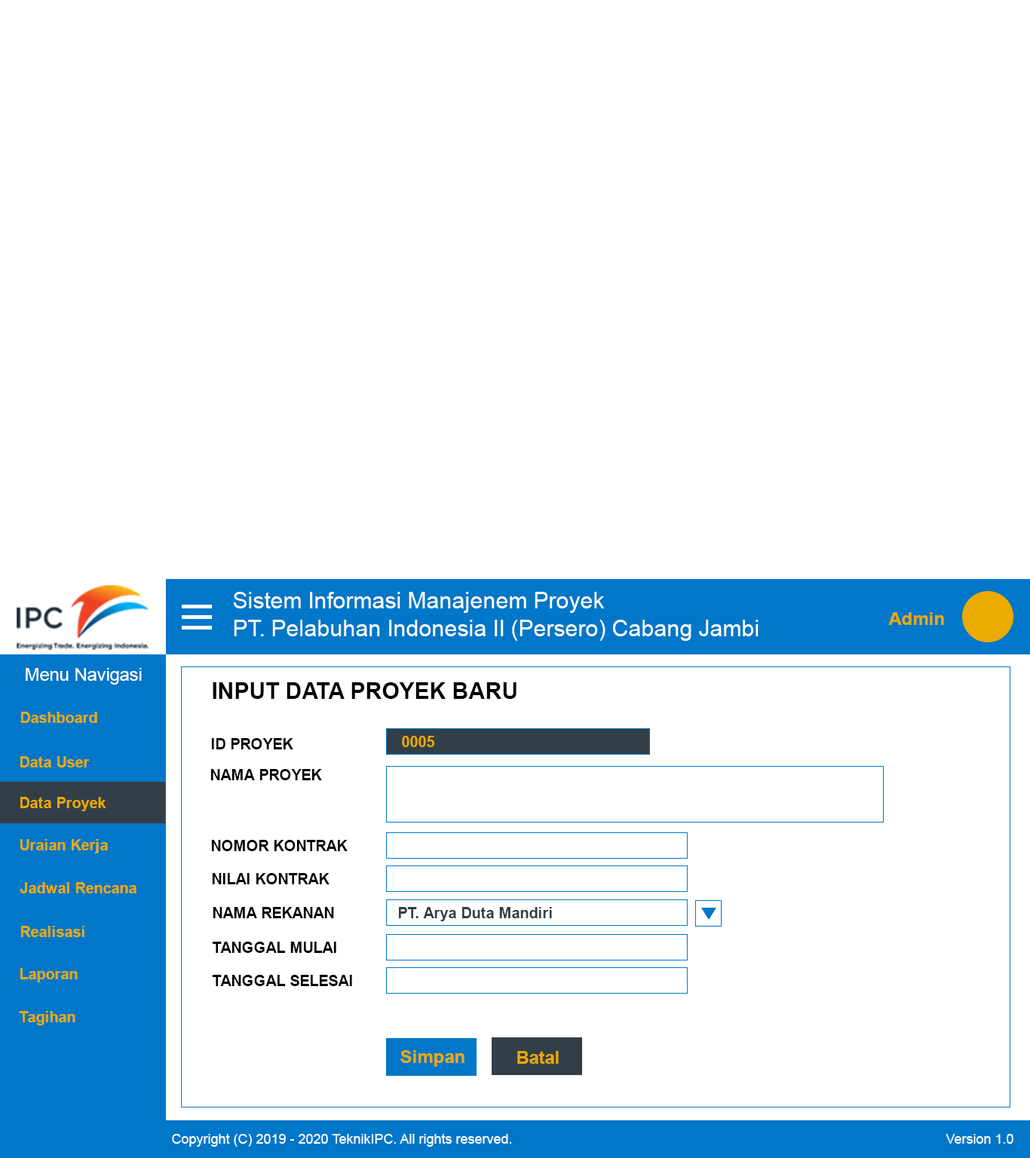
<style>
.page{position:relative;width:1030px;height:1158px;background:#ffffff}
.page>*{position:absolute;margin:0}
.t1{font:22.6px "ArialMT";color:#ffffff}
.t2{font:18.1px "Arial-BoldMT";color:#eaaa00}
.t3{font:18.1px "ArialMT";color:#ffffff}
.t4{font:22.6px "Arial-BoldMT";color:#000000}
.t5{font:15.1px "Arial-BoldMT";color:#eaaa00}
.t6{font:15.1px "Arial-BoldMT";color:#000000}
.t7{font:15.1px "Arial-BoldMT";color:#323e48}
.t8{font:13.6px "ArialMT";color:#ffffff}
</style>
<div class="page">
<p class="t1" style="left:233px;top:592px;width:372px;height:21px">Sistem Informasi Manajenem Proyek</p>
<p class="t2" style="left:888px;top:612px;width:56px;height:13px">Admin</p>
<p class="t1" style="left:234px;top:620px;width:524px;height:21px">PT. Pelabuhan Indonesia II (Persero) Cabang Jambi</p>
<p class="t3" style="left:26px;top:668px;width:116px;height:17px">Menu Navigasi</p>
<p class="t4" style="left:213px;top:682px;width:303px;height:17px">INPUT DATA PROYEK BARU</p>
<p class="t5" style="left:21px;top:712px;width:76px;height:11px">Dashboard</p>
<p class="t5" style="left:402px;top:736px;width:32px;height:11px">0005</p>
<p class="t6" style="left:211px;top:738px;width:82px;height:11px">ID PROYEK</p>
<p class="t5" style="left:20px;top:756px;width:70px;height:11px">Data User</p>
<p class="t6" style="left:210px;top:769px;width:112px;height:11px">NAMA PROYEK</p>
<p class="t5" style="left:20px;top:797px;width:86px;height:14px">Data Proyek</p>
<p class="t5" style="left:20px;top:839px;width:88px;height:14px">Uraian Kerja</p>
<p class="t6" style="left:211px;top:840px;width:137px;height:11px">NOMOR KONTRAK</p>
<p class="t6" style="left:212px;top:873px;width:117px;height:11px">NILAI KONTRAK</p>
<p class="t5" style="left:20px;top:882px;width:116px;height:11px">Jadwal Rencana</p>
<p class="t6" style="left:213px;top:907px;width:121px;height:11px">NAMA REKANAN</p>
<p class="t7" style="left:399px;top:907px;width:153px;height:14px">PT. Arya Duta Mandiri</p>
<p class="t5" style="left:21px;top:926px;width:63px;height:11px">Realisasi</p>
<p class="t6" style="left:212px;top:942px;width:124px;height:11px">TANGGAL MULAI</p>
<p class="t5" style="left:20px;top:968px;width:58px;height:14px">Laporan</p>
<p class="t6" style="left:212px;top:975px;width:140px;height:11px">TANGGAL SELESAI</p>
<p class="t5" style="left:19px;top:1011px;width:56px;height:14px">Tagihan</p>
<p class="t2" style="left:400px;top:1050px;width:64px;height:17px">Simpan</p>
<p class="t2" style="left:517px;top:1051px;width:42px;height:13px">Batal</p>
<p class="t8" style="left:172px;top:1134px;width:339px;height:13px">Copyright (C) 2019 - 2020 TeknikIPC. All rights reserved.</p>
<p class="t8" style="left:945px;top:1134px;width:68px;height:10px">Version 1.0</p>
</div>
